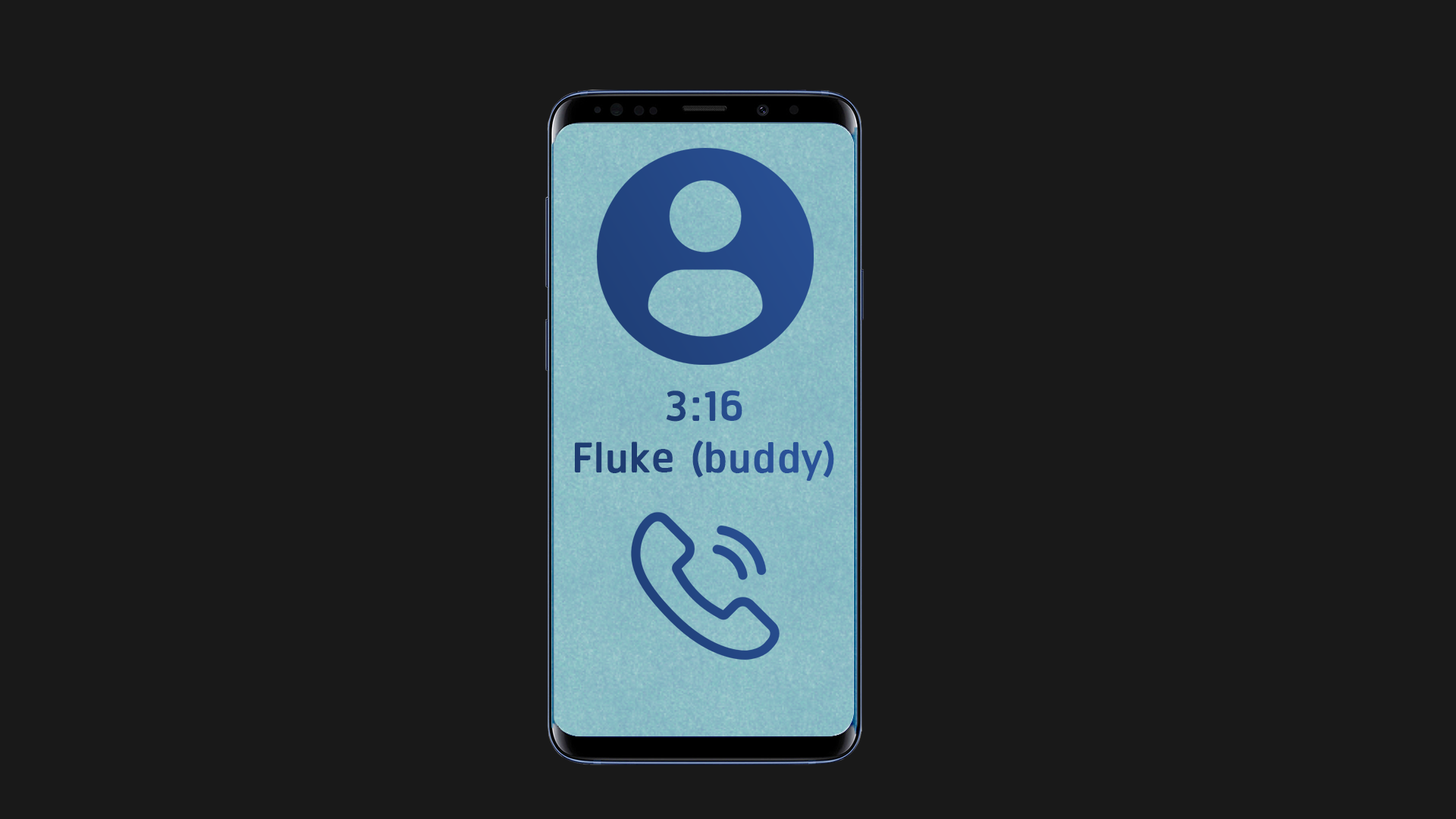
<style>
.page{position:relative;width:1456px;height:819px;background:#191919}
.page>*{position:absolute;margin:0}
.t1{font:54.6px "RSU-Bold";color:#254a8a}
.t2{font:54.6px "RSU-Bold";color:#254887}
</style>
<div class="page">
<p class="t1" style="left:667px;top:390px;width:75px;height:32px">3:16</p>
<p class="t2" style="left:575px;top:440px;width:259px;height:41px">Fluke (buddy)</p>
</div>
